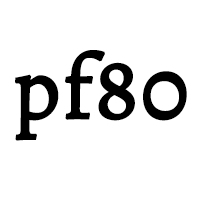
<style>
.page{position:relative;width:200px;height:200px;background:#ffffff}
.page>*{position:absolute;margin:0}
.t1{font:90px "Alegreya-Regular";color:#000000;font-weight:bold}
</style>
<div class="page">
<p class="t1" style="left:15px;top:50px;width:172px;height:91px">pf80</p>
</div>
